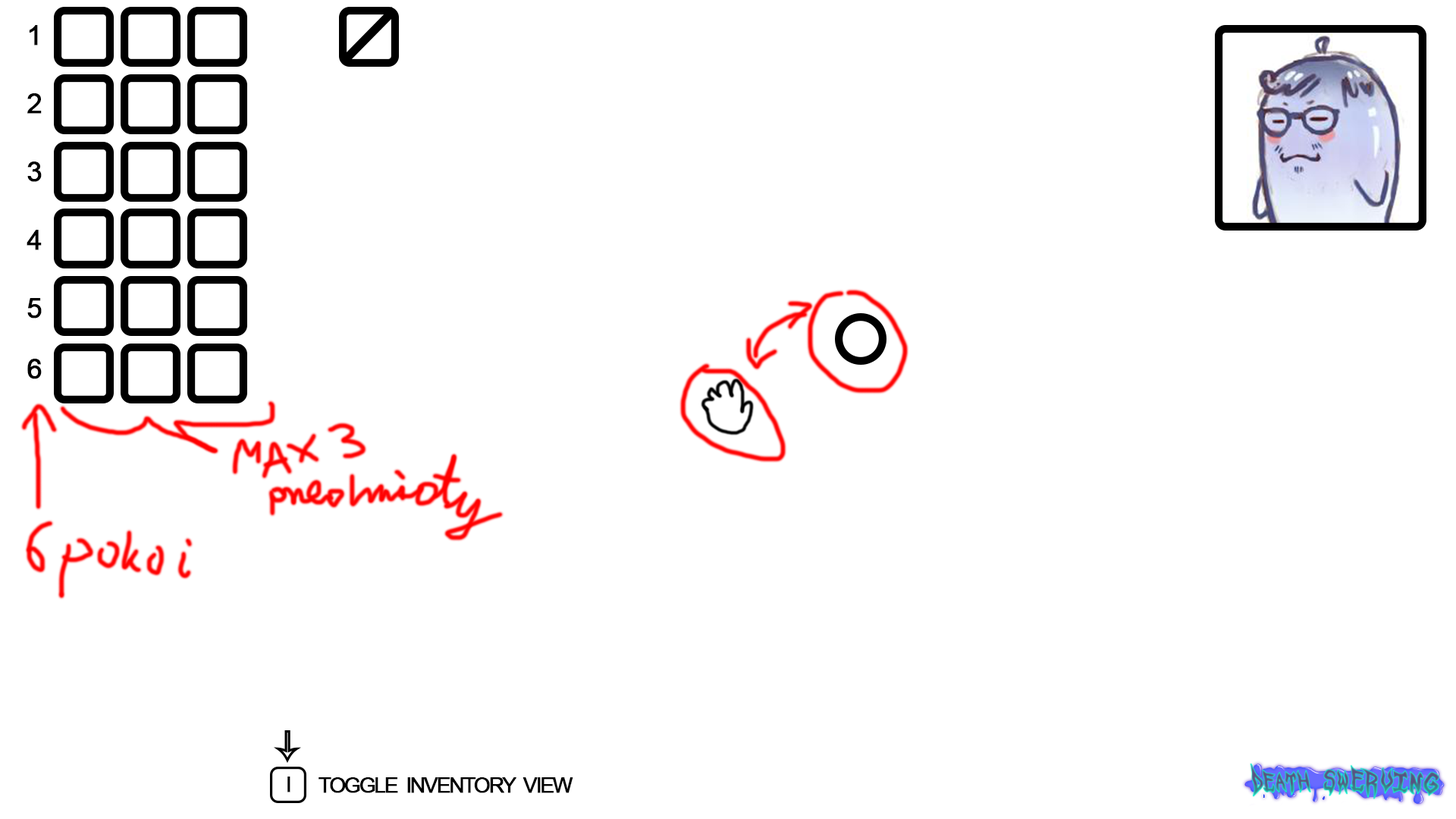
<style>
.page{position:relative;width:1456px;height:819px;background:#ffffff}
.page>*{position:absolute;margin:0}
.t1{font:27.3px "ArialMT";color:#000000;font-weight:bold}
.t2{font:21.2px "ArialMT";letter-spacing:-0.1em;color:#000000;text-transform:uppercase;font-weight:bold}
</style>
<div class="page">
<p class="t1" style="left:29px;top:25px;width:9px;height:20px">1</p>
<p class="t1" style="left:27px;top:93px;width:15px;height:21px">2</p>
<p class="t1" style="left:27px;top:162px;width:15px;height:20px">3</p>
<p class="t1" style="left:27px;top:230px;width:15px;height:20px">4</p>
<p class="t1" style="left:27px;top:298px;width:15px;height:20px">5</p>
<p class="t1" style="left:27px;top:359px;width:15px;height:20px">6</p>
<p class="t2" style="left:287px;top:777px;width:3px;height:15px">i</p>
<p class="t2" style="left:318px;top:777px;width:255px;height:16px">toggle  inventory  view</p>
</div>
